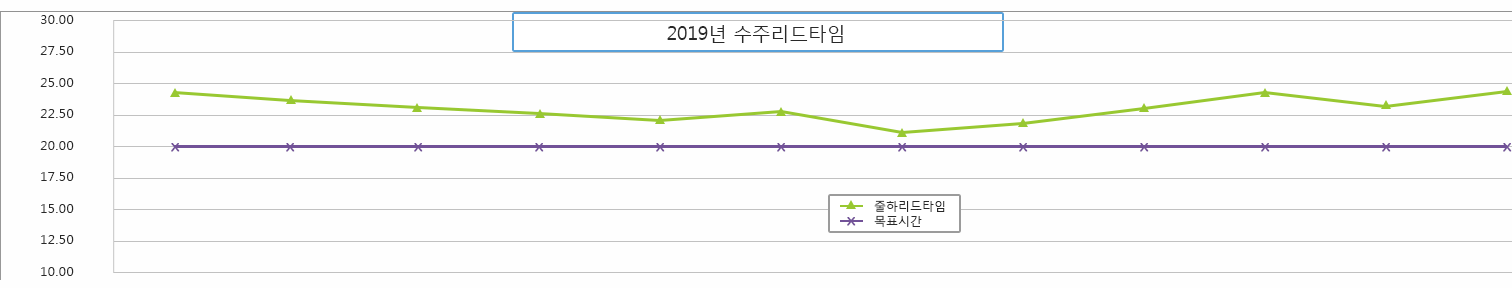
<style>
.page{position:relative;width:1512px;height:288px;background:#fefefe}
.page>*{position:absolute;margin:0}
.t1{font:13.3px/31.5px "MalgunGothicRegular";letter-spacing:0.025em;color:#282828}
.t2{font:18.7px "MalgunGothicRegular";color:#282828}
.t3{font:14.7px "Gulim";letter-spacing:-0.05em;color:#725298;font-weight:bold;scale:1.2 1}
.t4{font:12px "MalgunGothicRegular";color:#282828}
</style>
<div class="page">
<p class="t1" style="left:40px;top:15px;width:34px;height:261px;text-align:center">30.00<br>27.50<br>25.00<br>22.50<br>20.00<br>17.50<br>15.00<br>12.50<br>10.00</p>
<p class="t2" style="left:667px;top:25px;width:176px;height:18px">2019년 수주리드타임</p>
<p class="t3" style="left:171px;top:143px;width:9px;height:9px">x</p>
<p class="t3" style="left:286px;top:143px;width:9px;height:9px">x</p>
<p class="t3" style="left:414px;top:143px;width:9px;height:9px">x</p>
<p class="t3" style="left:535px;top:143px;width:9px;height:9px">x</p>
<p class="t3" style="left:656px;top:143px;width:9px;height:9px">x</p>
<p class="t3" style="left:777px;top:143px;width:9px;height:9px">x</p>
<p class="t3" style="left:898px;top:143px;width:9px;height:9px">x</p>
<p class="t3" style="left:1019px;top:143px;width:9px;height:9px">x</p>
<p class="t3" style="left:1140px;top:143px;width:9px;height:9px">x</p>
<p class="t3" style="left:1261px;top:143px;width:9px;height:9px">x</p>
<p class="t3" style="left:1382px;top:143px;width:9px;height:9px">x</p>
<p class="t3" style="left:1503px;top:143px;width:9px;height:9px">x</p>
<p class="t4" style="left:874px;top:200px;width:71px;height:12px">줄하리드타임</p>
<p class="t3" style="left:847px;top:217px;width:9px;height:9px">x</p>
<p class="t4" style="left:874px;top:215px;width:48px;height:13px">목표시간</p>
</div>
